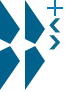
<style>
.page{position:relative;width:65px;height:92px;background:#ffffff}
.page>*{position:absolute;margin:0}
.t1{font:40px "ProximaNova-Bold";letter-spacing:-0.02em;color:#0d6c8d}
</style>
<div class="page">
<p class="t1" style="left:49px;top:18px;width:12px;height:15px;rotate:180deg">›</p>
<p class="t1" style="left:49px;top:35px;width:12px;height:15px">›</p>
</div>
